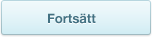
<style>
.page{position:relative;width:152px;height:37px}
.page>*{position:absolute;margin:0}
.t1{font:13px "HelveticaNeue-Bold";color:#437182}
</style>
<div class="page">
<p class="t1" style="left:48px;top:13px;width:48px;height:11px">Fortsätt</p>
</div>
